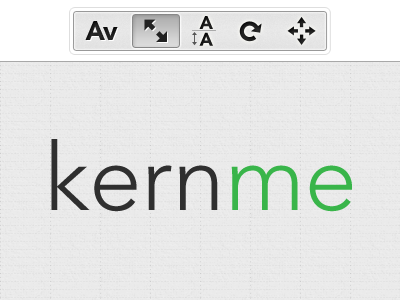
<style>
.page{position:relative;width:400px;height:300px;background:#eaeaea}
.page>*{position:absolute;margin:0}
.t1{font:18.3px/16.8px "AvenirLTStd-Black";color:#1b1b1b}
.t2{font:26.2px "AvenirLTStd-Black";color:#333333}
.t3{font:93.9px "AvenirLTStd-Light";color:#2f2f2f}
.t4{font:93.9px "AvenirLTStd-Light";color:#39b54a}
</style>
<div class="page">
<p class="t1" style="left:199px;top:16px;width:14px;height:30px">A<br>A</p>
<p class="t2" style="left:85px;top:21px;width:33px;height:19px">Av</p>
<p class="t3" style="left:51px;top:139px;width:301px;height:73px">kern<span class="t4">me</span></p>
</div>
